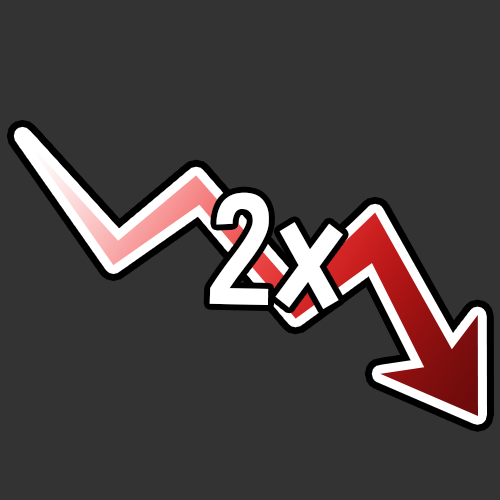
<style>
.page{position:relative;width:500px;height:500px;background:#333333}
.page>*{position:absolute;margin:0}
.t1{font:39.9px "Go-Banana";color:#ffffff}
</style>
<div class="page">
<p class="t1" style="left:209px;top:192px;width:134px;height:117px;rotate:2deg">2x</p>
</div>
